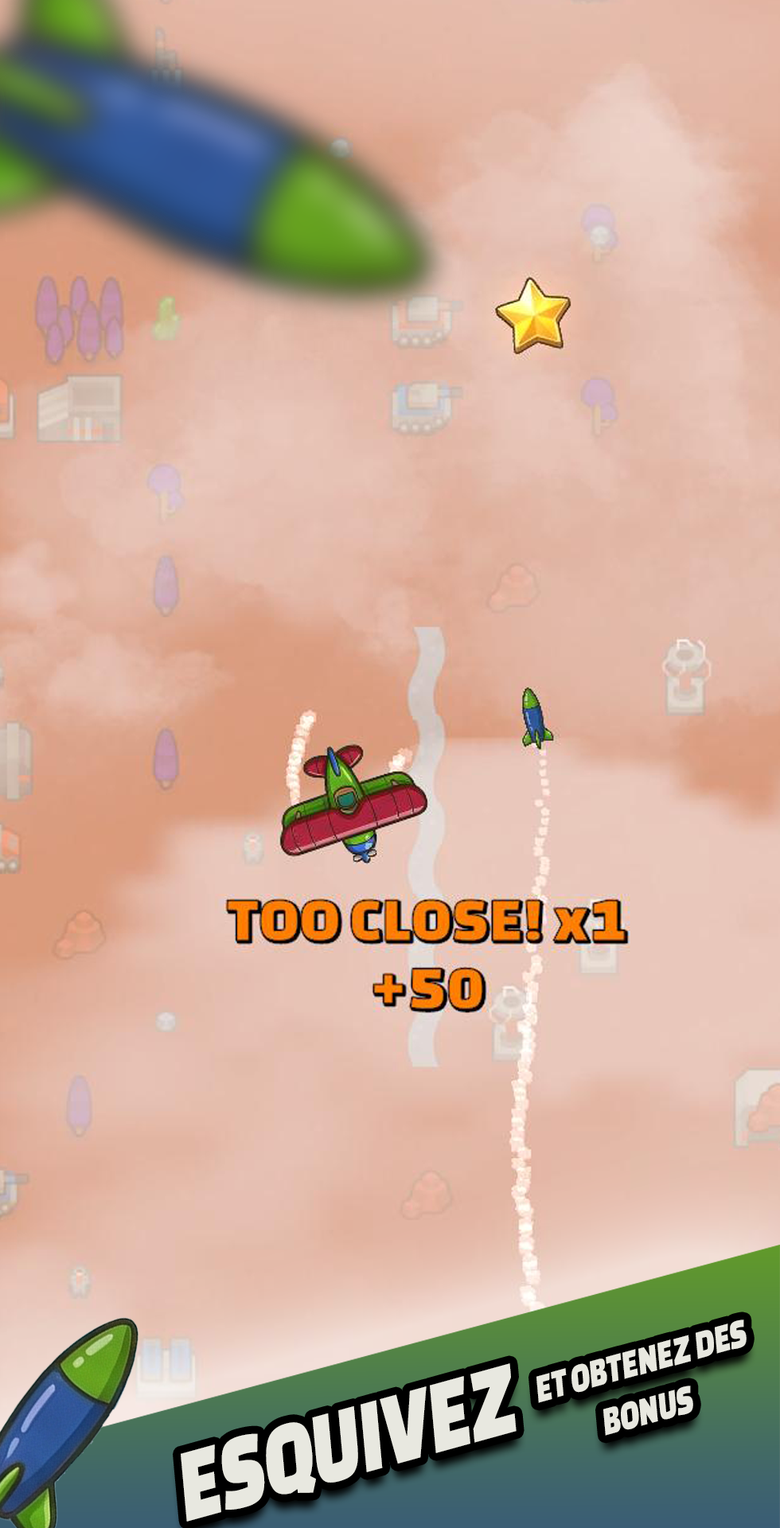
<style>
.page{position:relative;width:780px;height:1528px}
.page>*{position:absolute;margin:0}
.t1{font:41.8px "ChangaOne";color:#e8e8e0;scale:0.74 1}
.t2{font:108.4px "ChangaOne";color:#e8e8e0;scale:0.74 1}
</style>
<div class="page">
<p class="t1" style="left:537px;top:1320px;width:210px;height:116px;text-align:center;rotate:-15deg">ET OBTENEZ DES <br>BONUS</p>
<p class="t2" style="left:181px;top:1364px;width:336px;height:158px;rotate:-15deg">ESQUIVEZ</p>
</div>
